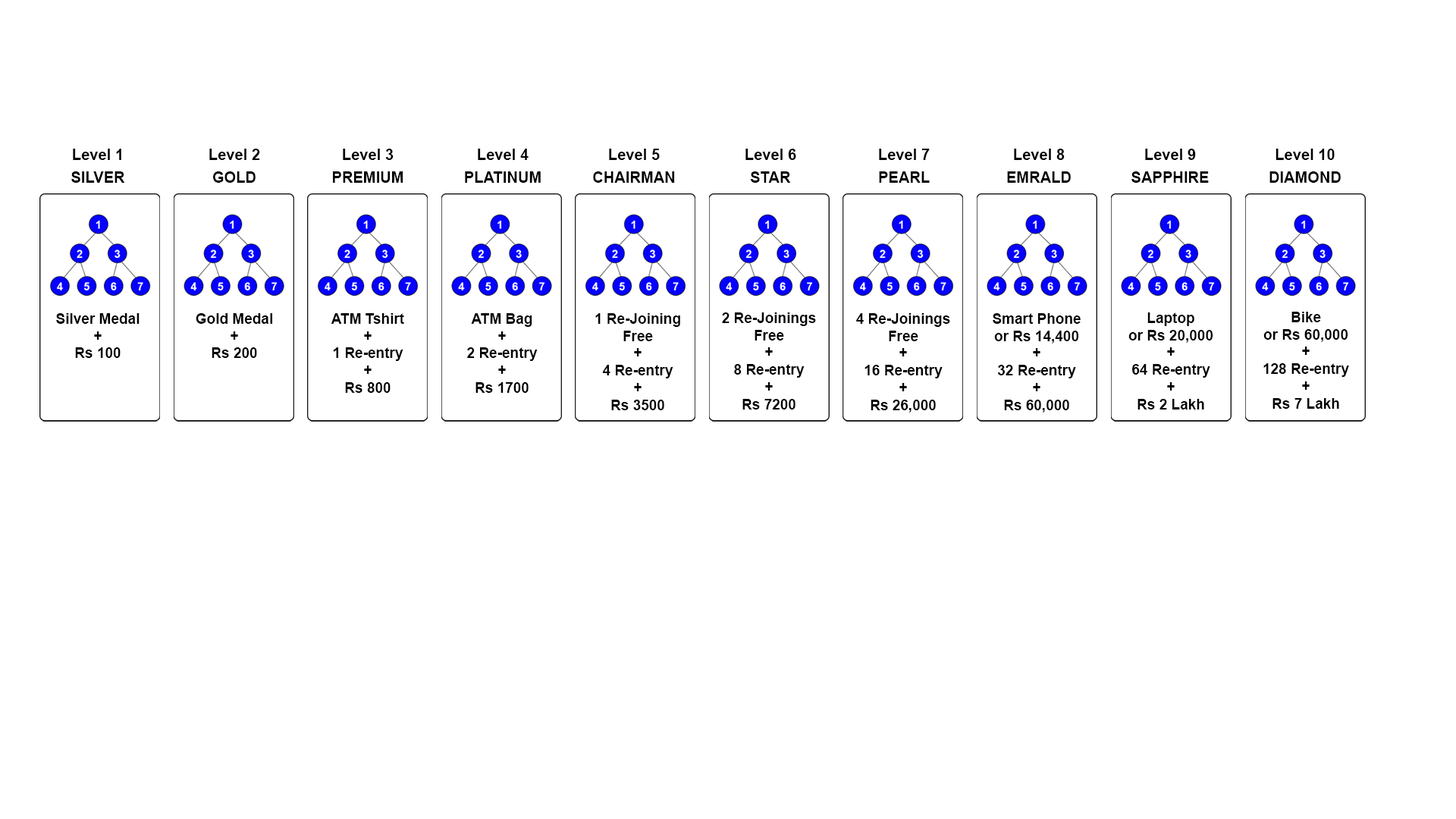
<style>
.page{position:relative;width:1456px;height:819px;background:#ffffff}
.page>*{position:absolute;margin:0}
.t1{font:15.3px/22.7px "Arial-BoldMT";color:#000000}
.t2{font:14.4px "Arial-BoldMT";color:#000000}
</style>
<div class="page">
<p class="t1" style="left:71px;top:149px;width:54px;height:34px;text-align:center">Level 1<br>SILVER</p>
<p class="t1" style="left:209px;top:149px;width:51px;height:34px;text-align:center">Level 2<br>GOLD</p>
<p class="t1" style="left:333px;top:149px;width:70px;height:34px;text-align:center">Level 3<br>PREMIUM</p>
<p class="t1" style="left:465px;top:149px;width:76px;height:34px;text-align:center">Level 4<br>PLATINUM</p>
<p class="t1" style="left:593px;top:149px;width:82px;height:34px;text-align:center">Level 5<br>CHAIRMAN</p>
<p class="t1" style="left:745px;top:149px;width:51px;height:34px;text-align:center">Level 6<br>STAR</p>
<p class="t1" style="left:879px;top:149px;width:51px;height:34px;text-align:center">Level 7<br>PEARL</p>
<p class="t1" style="left:1007px;top:149px;width:64px;height:34px;text-align:center">Level 8<br>EMRALD</p>
<p class="t1" style="left:1131px;top:149px;width:78px;height:34px;text-align:center">Level 9<br>SAPPHIRE</p>
<p class="t1" style="left:1269px;top:149px;width:72px;height:34px;text-align:center">Level 10<br>DIAMOND</p>
<p class="t2" style="left:56px;top:313px;width:84px;height:45px;text-align:center">Silver Medal<br>+<br>Rs 100</p>
<p class="t2" style="left:196px;top:313px;width:76px;height:45px;text-align:center">Gold Medal<br>+<br>Rs 200</p>
<p class="t2" style="left:331px;top:313px;width:73px;height:80px;text-align:center">ATM Tshirt<br>+<br>1 Re-entry<br>+<br>Rs 800</p>
<p class="t2" style="left:467px;top:313px;width:71px;height:80px;text-align:center">ATM Bag<br>+<br>2 Re-entry<br>+<br>Rs 1700</p>
<p class="t2" style="left:595px;top:313px;width:85px;height:97px;text-align:center">1 Re-Joining <br>Free<br>+<br>4 Re-entry<br>+<br>Rs 3500</p>
<p class="t2" style="left:722px;top:312px;width:94px;height:97px;text-align:center">2 Re-Joinings<br>Free<br>+<br>8 Re-entry<br>+<br>Rs 7200</p>
<p class="t2" style="left:856px;top:313px;width:94px;height:100px;text-align:center">4 Re-Joinings<br>Free<br>+<br>16 Re-entry<br>+<br>Rs 26,000</p>
<p class="t2" style="left:993px;top:313px;width:88px;height:100px;text-align:center">Smart Phone<br>or Rs 14,400<br>+<br>32 Re-entry<br>+<br>Rs 60,000</p>
<p class="t2" style="left:1128px;top:312px;width:85px;height:97px;text-align:center">Laptop<br>or Rs 20,000<br>+<br>64 Re-entry<br>+<br>Rs 2 Lakh</p>
<p class="t2" style="left:1263px;top:312px;width:86px;height:97px;text-align:center">Bike<br>or Rs 60,000<br>+<br>128 Re-entry<br>+<br>Rs 7 Lakh</p>
</div>
